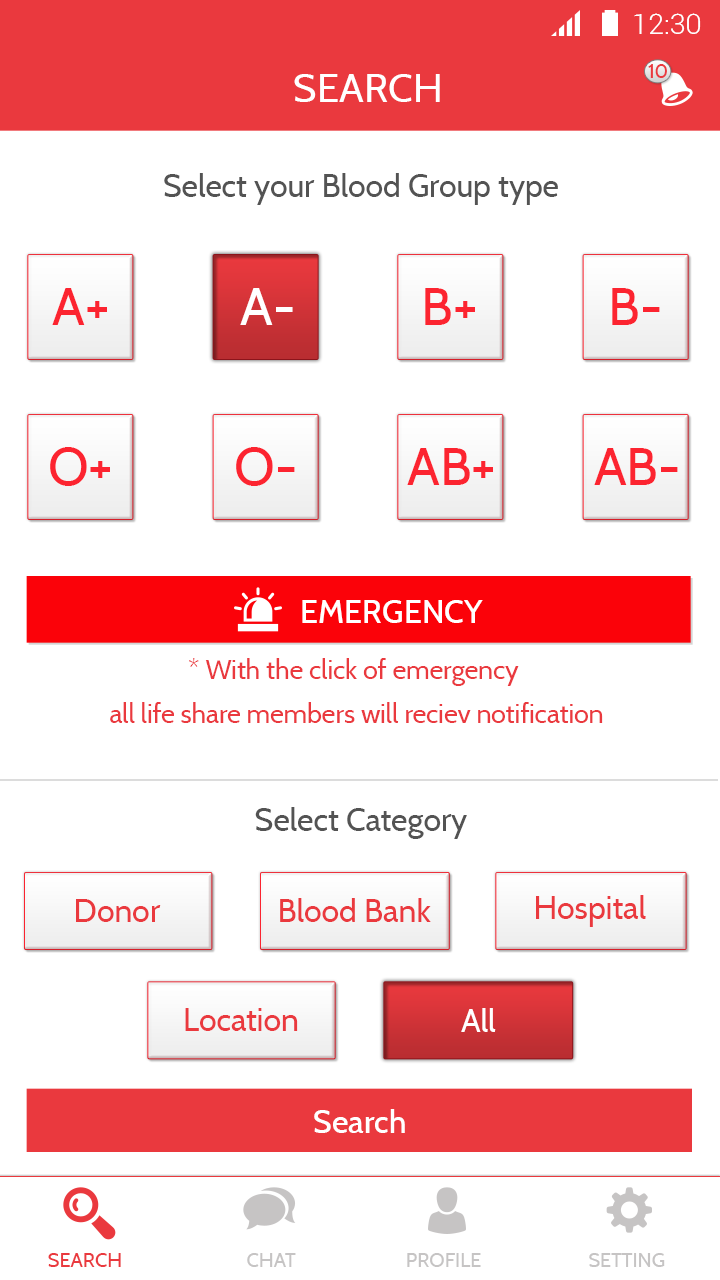
<style>
.page{position:relative;width:720px;height:1280px;background:#ffffff}
.page>*{position:absolute;margin:0}
.t1{font:28.4px "Roboto-Light";color:#ffffff}
.t2{font:18.8px "Cabin-Regular";color:#ea393e}
.t3{font:40px "Cabin-Regular";color:#ffffff}
.t4{font:32px "Cabin-Regular";color:#535353}
.t5{font:53.1px "Cabin-Regular";color:#fc2430}
.t6{font:53.1px "Cabin-Regular";color:#ffffff}
.t7{font:53px "Cabin-Regular";color:#fc2430}
.t8{font:32px "Cabin-Medium";color:#ffffff}
.t9{font:26.7px/43.5px "Cabin-Regular";color:#ea393e}
.t10{font:32px "Cabin-Regular";color:#ea393e}
.t11{font:32px "Cabin-Regular";color:#ffffff}
.t12{font:20px "Cabin-Regular";color:#ea393e}
.t13{font:20px "Cabin-Regular";color:#c6c4c4}
</style>
<div class="page">
<p class="t1" style="left:634px;top:13px;width:67px;height:21px">12:30</p>
<p class="t2" style="left:648px;top:64px;width:19px;height:14px">10</p>
<p class="t3" style="left:294px;top:74px;width:146px;height:28px">SEARCH</p>
<p class="t4" style="left:164px;top:173px;width:394px;height:32px">Select your Blood Group type</p>
<p class="t5" style="left:52px;top:288px;width:55px;height:37px">A+</p>
<p class="t6" style="left:240px;top:288px;width:53px;height:37px">A-</p>
<p class="t5" style="left:425px;top:288px;width:50px;height:37px">B+</p>
<p class="t7" style="left:612px;top:288px;width:48px;height:37px">B-</p>
<p class="t7" style="left:50px;top:447px;width:60px;height:39px">O+</p>
<p class="t7" style="left:236px;top:447px;width:59px;height:39px">O-</p>
<p class="t7" style="left:407px;top:448px;width:86px;height:37px">AB+</p>
<p class="t7" style="left:594px;top:448px;width:84px;height:37px">AB-</p>
<p class="t8" style="left:302px;top:600px;width:181px;height:23px">EMERGENCY</p>
<p class="t9" style="left:110px;top:658px;width:493px;height:65px;text-align:center">* With the click of emergency <br>all life share members will reciev notification</p>
<p class="t4" style="left:255px;top:807px;width:212px;height:32px">Select Category</p>
<p class="t10" style="left:76px;top:899px;width:85px;height:23px">Donor</p>
<p class="t10" style="left:280px;top:898px;width:151px;height:24px">Blood Bank</p>
<p class="t10" style="left:536px;top:895px;width:110px;height:32px">Hospital</p>
<p class="t10" style="left:185px;top:1008px;width:113px;height:23px">Location</p>
<p class="t11" style="left:461px;top:1008px;width:35px;height:24px">All</p>
<p class="t8" style="left:314px;top:1109px;width:91px;height:24px">Search</p>
<p class="t12" style="left:48px;top:1253px;width:73px;height:14px">SEARCH</p>
<p class="t13" style="left:247px;top:1253px;width:49px;height:14px">CHAT</p>
<p class="t13" style="left:407px;top:1253px;width:74px;height:14px">PROFILE</p>
<p class="t13" style="left:589px;top:1253px;width:76px;height:14px">SETTING</p>
</div>
